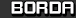
<style>
.page{position:relative;width:76px;height:18px;background:#333333}
.page>*{position:absolute;margin:0}
.t1{font:20px "DFSoGeiStd-W5";letter-spacing:0.021em;color:#fefdfe;scale:0.87 1}
</style>
<div class="page">
<p class="t1" style="left:11px;top:1px;width:63px;height:13px">BORDA</p>
</div>
